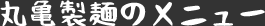
<style>
.page{position:relative;width:265px;height:26px;background:#333333}
.page>*{position:absolute;margin:0}
.t1{font:30px "Otsutome_font-Bold";color:#ffffff}
</style>
<div class="page">
<p class="t1" style="left:0px;top:0px;width:265px;height:26px">丸亀製麺のメニュー</p>
</div>
